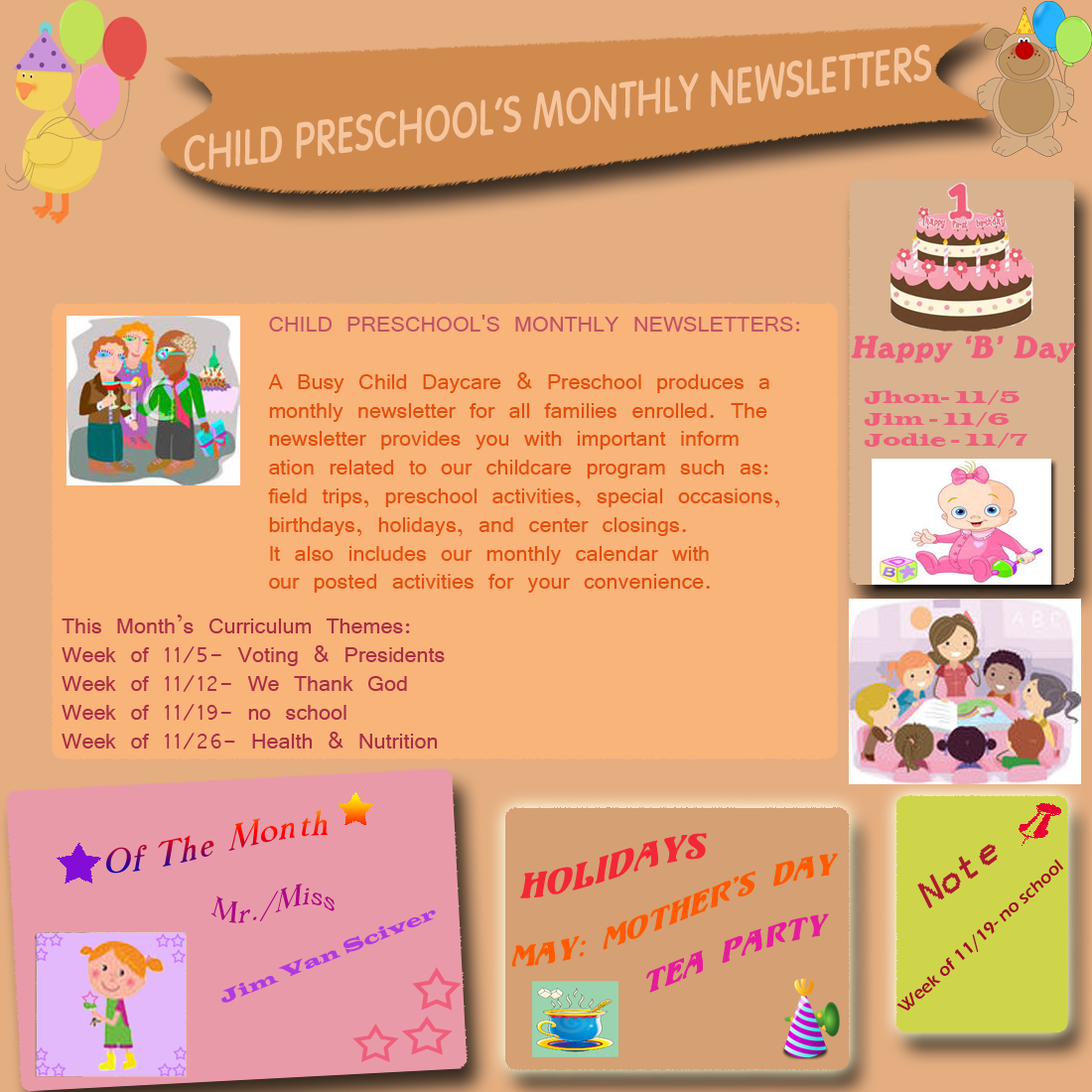
<style>
.page{position:relative;width:1092px;height:1092px;background:#f9b47a}
.page>*{position:absolute;margin:0}
.t1{font:47.7px "VogelNormal";letter-spacing:0.025em;color:#f5c59e;font-weight:bold;font-style:italic;scale:0.78 1}
.t2{font:23.8px "Vrinda";color:#e24e0c}
.t3{font:23.8px "Vrinda";color:#c25066}
.t4{font:29.8px "WindsorBT-Roman";letter-spacing:0.025em;color:#ef5f7b;font-weight:bold;font-style:italic}
.t5{font:17.9px "LatinWide";color:#ef5f7b}
.t6{font:23.8px "Vrinda";color:#aa2d45}
.t7{font:35.7px/11.9px "Unicorn";letter-spacing:0.025em;color:#f32837;font-style:italic}
.t8{font:29.8px/11.9px "Unicorn";letter-spacing:0.025em;color:#ff5a00;font-style:italic}
.t9{font:29.8px/11.9px "Unicorn";letter-spacing:0.025em;color:#e51d9b;font-style:italic}
.t10{font:17.9px "ErasITC-Demi";color:#a00e23}
.t11{font:29.8px "WindsorBT-Light";letter-spacing:0.025em;color:#ad0986;font-style:italic}
.t12{font:17.9px "LatinWide";color:#b03ae1}
</style>
<div class="page">
<p class="t1" style="left:184px;top:45px;width:747px;height:127px;rotate:-7deg">CHILD PRESCHOOL'S MONTHLY NEWSLETTERS</p>
<p class="t2" style="left:268px;top:315px;width:532px;height:278px"><span class="t3">CHILD PRESCHOOL'S MONTHLY NEWSLETTERS:<br></span><br>A Busy Child Daycare &amp; Preschool produces a <br>monthly newsletter for all families enrolled. The <br>newsletter provides you with important inform<br>ation related to our childcare program such as: <br>field trips, preschool activities, special occasions, <br>birthdays, holidays, and center closings. <br>It also includes our monthly calendar with <br>our posted activities for your convenience.</p>
<p class="t4" style="left:851px;top:336px;width:225px;height:27px">Happy ‘B’ Day</p>
<p class="t5" style="left:864px;top:390px;width:163px;height:58px">Jhon- 11/5<br>Jim - 11/6<br>Jodie - 11/7</p>
<p class="t6" style="left:62px;top:614px;width:383px;height:135px">This Month’s Curriculum Themes:<br>Week of 11/5- Voting &amp; Presidents<br>Week of 11/12- We Thank God<br>Week of 11/19- no school<br>Week of 11/26- Health &amp; Nutrition</p>
<p class="t7" style="left:520px;top:833px;width:187px;height:65px">Holidays</p>
<p class="t8" style="left:511px;top:853px;width:327px;height:140px">May: Mother’s Day <br><br><br><br><br>        <span class="t9">Tea Party</span></p>
<p class="t10" style="left:896px;top:859px;width:168px;height:152px;rotate:-43deg">Week of 11/19- no school</p>
<p class="t11" style="left:210px;top:884px;width:125px;height:39px">Mr./Miss</p>
<p class="t12" style="left:221px;top:910px;width:215px;height:93px;rotate:-22deg">Jim Van Sciver</p>
</div>
